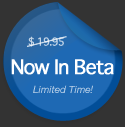
<style>
.page{position:relative;width:125px;height:127px;background:#333333}
.page>*{position:absolute;margin:0}
.t1{font:10.5px "Geneva";letter-spacing:-0.075em;color:#c0d2e4}
.t2{font:19.5px "Geneva";letter-spacing:-0.075em;color:#ffffff;font-weight:bold}
.t3{font:10px "HelveticaNeue-Italic";color:#bcd2e9}
</style>
<div class="page">
<p class="t1" style="left:28px;top:36px;width:36px;height:11px">$ 19.95</p>
<p class="t2" style="left:11px;top:59px;width:103px;height:16px">Now In Beta</p>
<p class="t3" style="left:33px;top:85px;width:60px;height:8px">Limited Time!</p>
</div>
